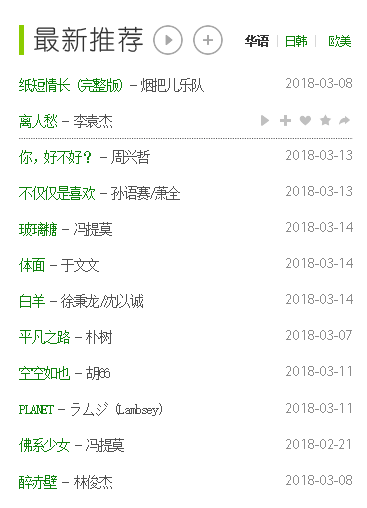
<style>
.page{position:relative;width:367px;height:508px;background:#ffffff}
.page>*{position:absolute;margin:0}
.t1{font:26.7px "YouYuan";letter-spacing:0.05em;color:#323232}
.t2{font:12px "SimSun";letter-spacing:0.05em;color:#333333;font-weight:bold}
.t3{font:12px "SimSun";letter-spacing:0.05em;color:#d8d8d8}
.t4{font:12px "SimSun";letter-spacing:0.05em;color:#0f820c}
.t5{font:14px/36.1px "SimSun";letter-spacing:-0.1em;color:#515151}
.t6{font:14px/36.1px "SimSun";letter-spacing:-0.1em;color:#0f820c}
.t7{font:14.7px/36.1px "MyriadPro-Regular";color:#8b8b8b}
</style>
<div class="page">
<p class="t1" style="left:34px;top:26px;width:109px;height:26px">最新推荐</p>
<p class="t2" style="left:245px;top:35px;width:106px;height:12px">华语 <span class="t3">| </span><span class="t4">日韩 </span><span class="t3">|  </span><span class="t4">欧美</span></p>
<p class="t5" style="left:19px;top:78px;width:185px;height:411px"><span class="t6">纸短情长 (完整版) </span>- 烟把儿乐队<br><span class="t6">离人愁 </span>- 李袁杰<br><span class="t6">你，好不好？ </span>- 周兴哲<br><span class="t6">不仅仅是喜欢 </span>- 孙语赛/萧全<br><span class="t6">玻璃糖 </span>- 冯提莫<br><span class="t6">体面 </span>- 于文文<br><span class="t6">白羊 </span>- 徐秉龙/沈以诚<br><span class="t6">平凡之路 </span>- 朴树<br><span class="t6">空空如也 </span>- 胡66<br><span class="t6">PLANET </span>- ラムジ (Lambsey)<br><span class="t6">佛系少女 </span>- 冯提莫<br><span class="t6">醉赤壁 </span>- 林俊杰</p>
<p class="t7" style="left:286px;top:78px;width:67px;height:407px">2018-03-08<br><br>2018-03-13<br>2018-03-13<br>2018-03-14<br>2018-03-14<br>2018-03-14<br>2018-03-07<br>2018-03-11<br>2018-03-11<br>2018-02-21<br>2018-03-08</p>
</div>
